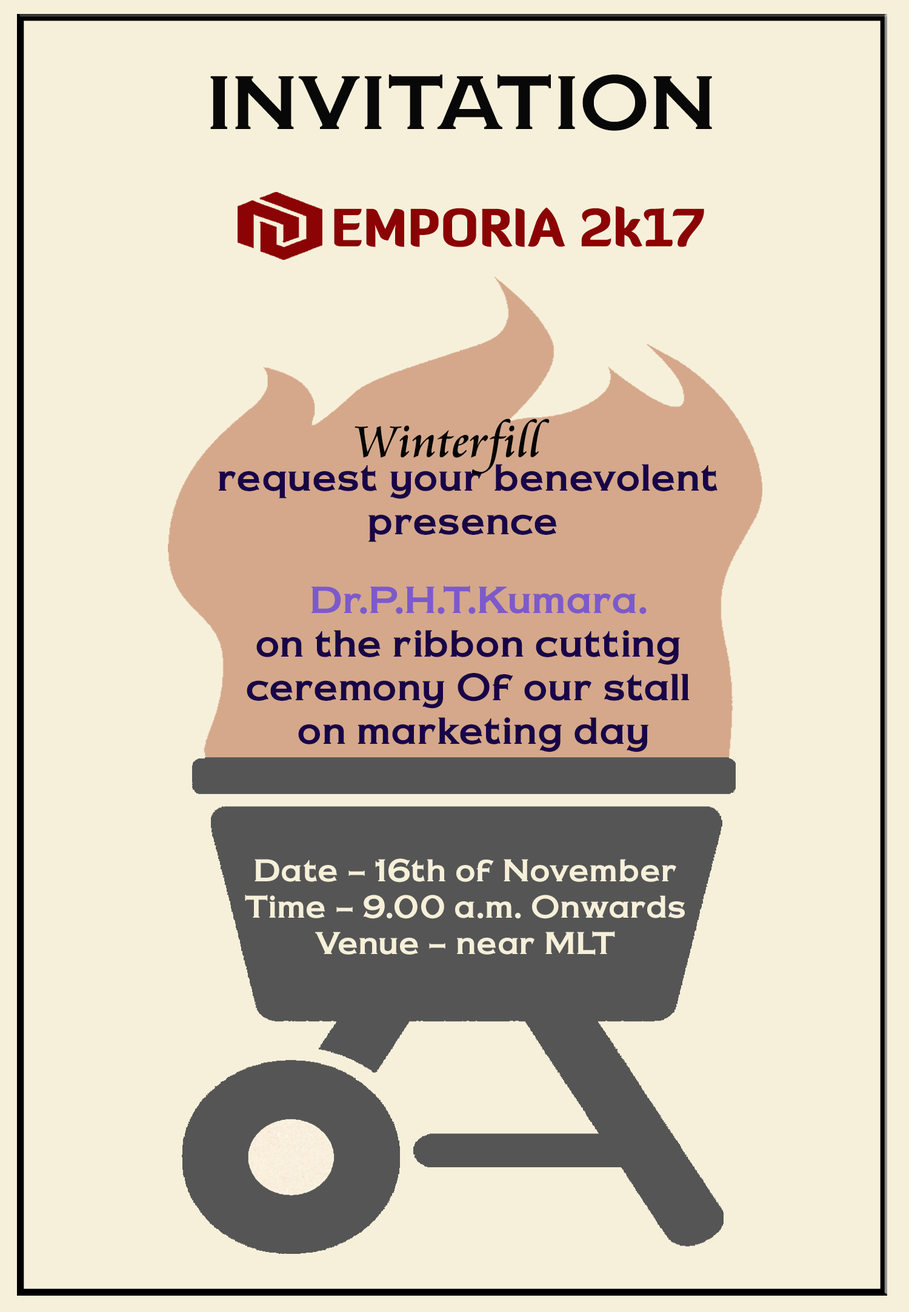
<style>
.page{position:relative;width:909px;height:1312px;background:#f6f0da}
.page>*{position:absolute;margin:0}
.t1{font:72.7px "CopperPennyDTPNormal";color:#080808}
.t2{font:51.5px "DiavloBlack-Regular";color:#8b0304}
.t3{font:48.5px "CataneoBT-Regular";color:#050505}
.t4{font:36.3px "CopperPennyDTPNormal";color:#180447}
.t5{font:36.3px "CopperPennyDTPNormal";color:#7c5aca}
.t6{font:30.3px "CopperPennyDTPNormal";color:#f6f0da}
</style>
<div class="page">
<p class="t1" style="left:210px;top:75px;width:502px;height:56px">INVITATION</p>
<p class="t2" style="left:334px;top:206px;width:370px;height:41px">EMPORIA 2k17</p>
<p class="t3" style="left:354px;top:419px;width:195px;height:56px">Winterfill</p>
<p class="t4" style="left:218px;top:464px;width:499px;height:288px;text-align:center">request your benevolent <br>presence  <br><br> <span class="t5">Dr.P.H.T.Kumara.<br></span>on the ribbon cutting <br>ceremony Of our stall <br>on marketing day</p>
<p class="t6" style="left:245px;top:858px;width:440px;height:97px;text-align:center">Date – 16th of November<br>Time – 9.00 a.m. Onwards<br>Venue – near MLT</p>
</div>
